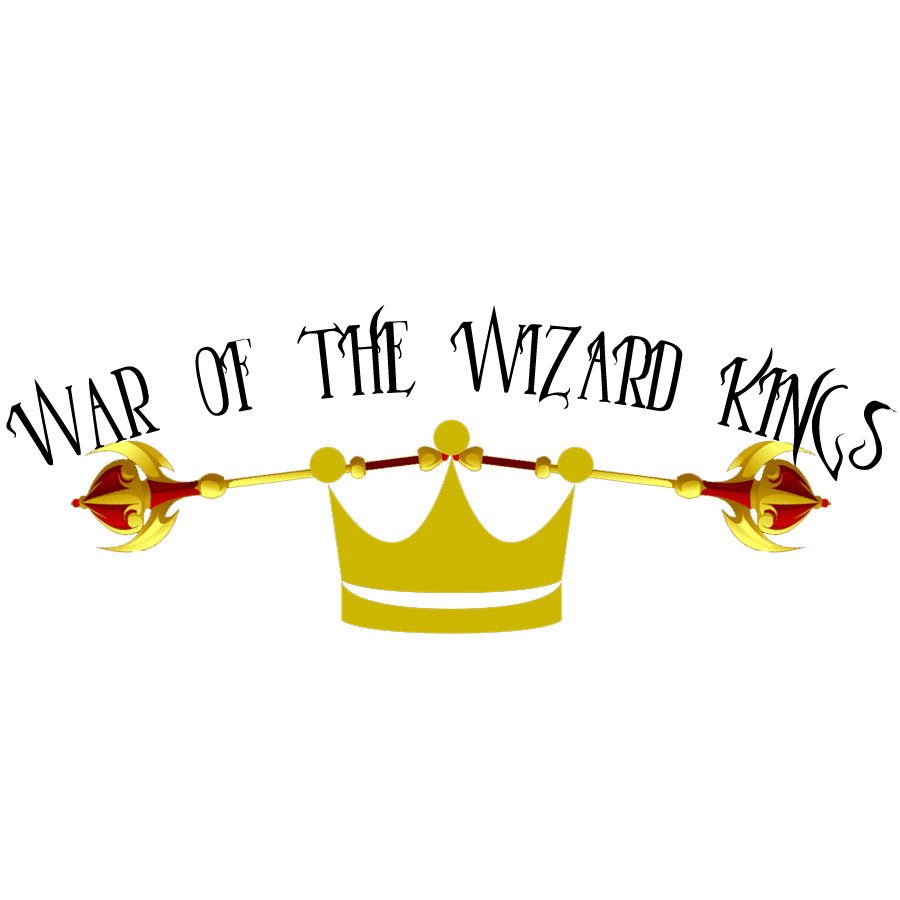
<style>
.page{position:relative;width:900px;height:900px;background:#ffffff}
.page>*{position:absolute;margin:0}
.t1{font:93px "Parseltongue";color:#000000}
</style>
<div class="page">
<p class="t1" style="left:6px;top:305px;width:891px;height:177px;text-align:center">War OF THE WIZARD KINGS</p>
</div>
